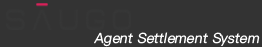
<style>
.page{position:relative;width:262px;height:47px;background:#333333}
.page>*{position:absolute;margin:0}
.t1{font:14px "PingFangSC-Regular";color:#ffffff;font-style:italic}
</style>
<div class="page">
<p class="t1" style="left:94px;top:32px;width:166px;height:15px">Agent Settlement System</p>
</div>
